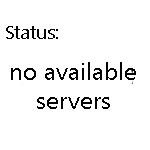
<style>
.page{position:relative;width:150px;height:150px;background:#ffffff}
.page>*{position:absolute;margin:0}
.t1{font:24px "SegoeUI";color:#040404}
</style>
<div class="page">
<p class="t1" style="left:11px;top:62px;width:125px;height:47px;text-align:center">no available<br>servers</p>
</div>
